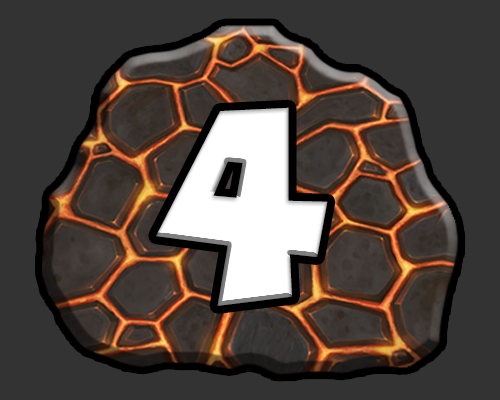
<style>
.page{position:relative;width:500px;height:400px;background:#333333}
.page>*{position:absolute;margin:0}
.t1{font:257.3px "Funhouse";color:#ffffff}
</style>
<div class="page">
<p class="t1" style="left:156px;top:107px;width:172px;height:199px">4</p>
</div>
